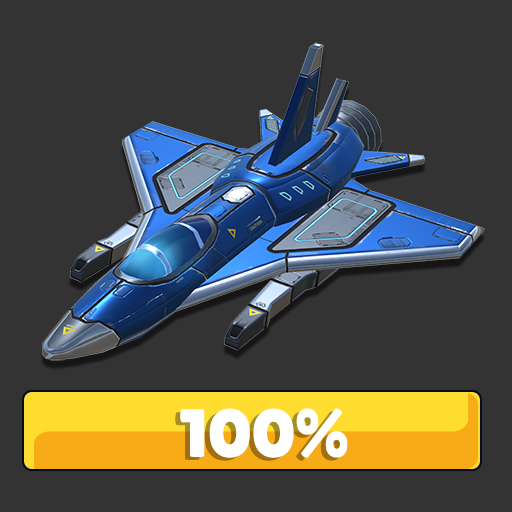
<style>
.page{position:relative;width:512px;height:512px;background:#333333}
.page>*{position:absolute;margin:0}
.t1{font:68.3px "LilitaOne";color:#ffffff;scale:1.03 1}
</style>
<div class="page">
<p class="t1" style="left:180px;top:408px;width:168px;height:50px">100%</p>
</div>
